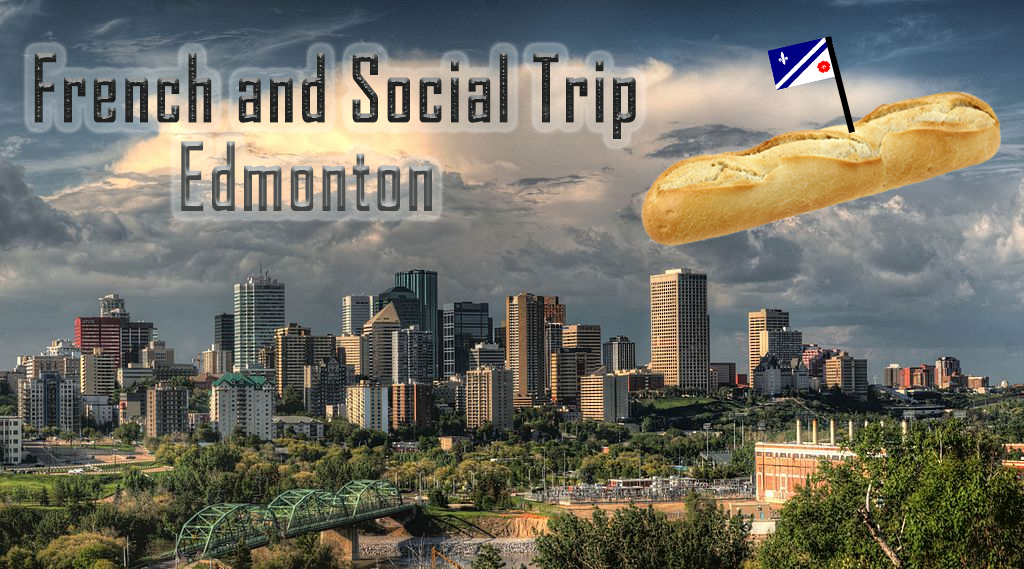
<style>
.page{position:relative;width:1024px;height:569px}
.page>*{position:absolute;margin:0}
.t1{font:90.9px "AgencyFB-Bold";letter-spacing:0.06em;color:#262827;scale:0.75 1}
.t2{font:90.9px "AgencyFB-Bold";letter-spacing:0.06em;color:#525452;scale:0.75 1}
</style>
<div class="page">
<p class="t1" style="left:34px;top:52px;width:602px;height:87px">French and Social Trip</p>
<p class="t2" style="left:181px;top:141px;width:251px;height:71px">Edmonton</p>
</div>
